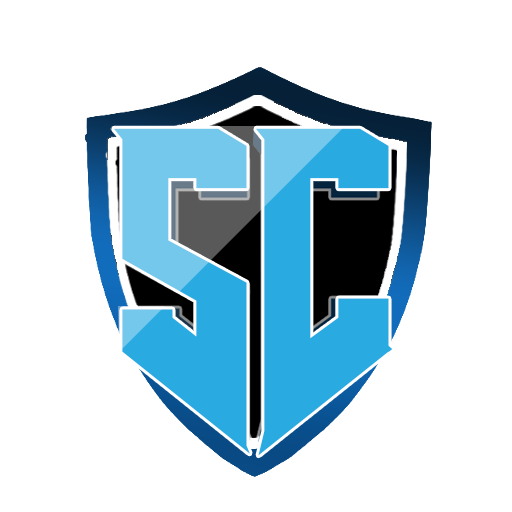
<style>
.page{position:relative;width:512px;height:512px;background:#ffffff}
.page>*{position:absolute;margin:0}
.t1{font:417.6px "AmazDooMRight2";letter-spacing:0.005em;color:#29abe2;text-transform:uppercase}
.t2{font:417.6px "AmazDooMLeft2";letter-spacing:0.005em;color:#29abe2;text-transform:uppercase}
</style>
<div class="page">
<p class="t1" style="left:114px;top:128px;width:279px;height:328px">s<span class="t2">c</span></p>
</div>
